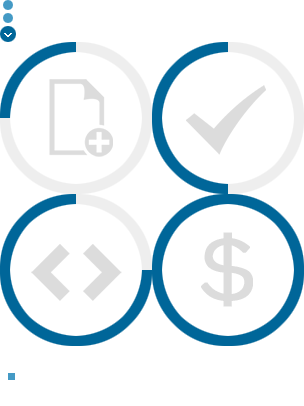
<style>
.page{position:relative;width:304px;height:406px;background:#ffffff}
.page>*{position:absolute;margin:0}
.t1{font:90px "SimHei";color:#dcdcdc;font-weight:bold}
</style>
<div class="page">
<p class="t1" style="left:201px;top:232px;width:52px;height:75px">＄</p>
</div>
